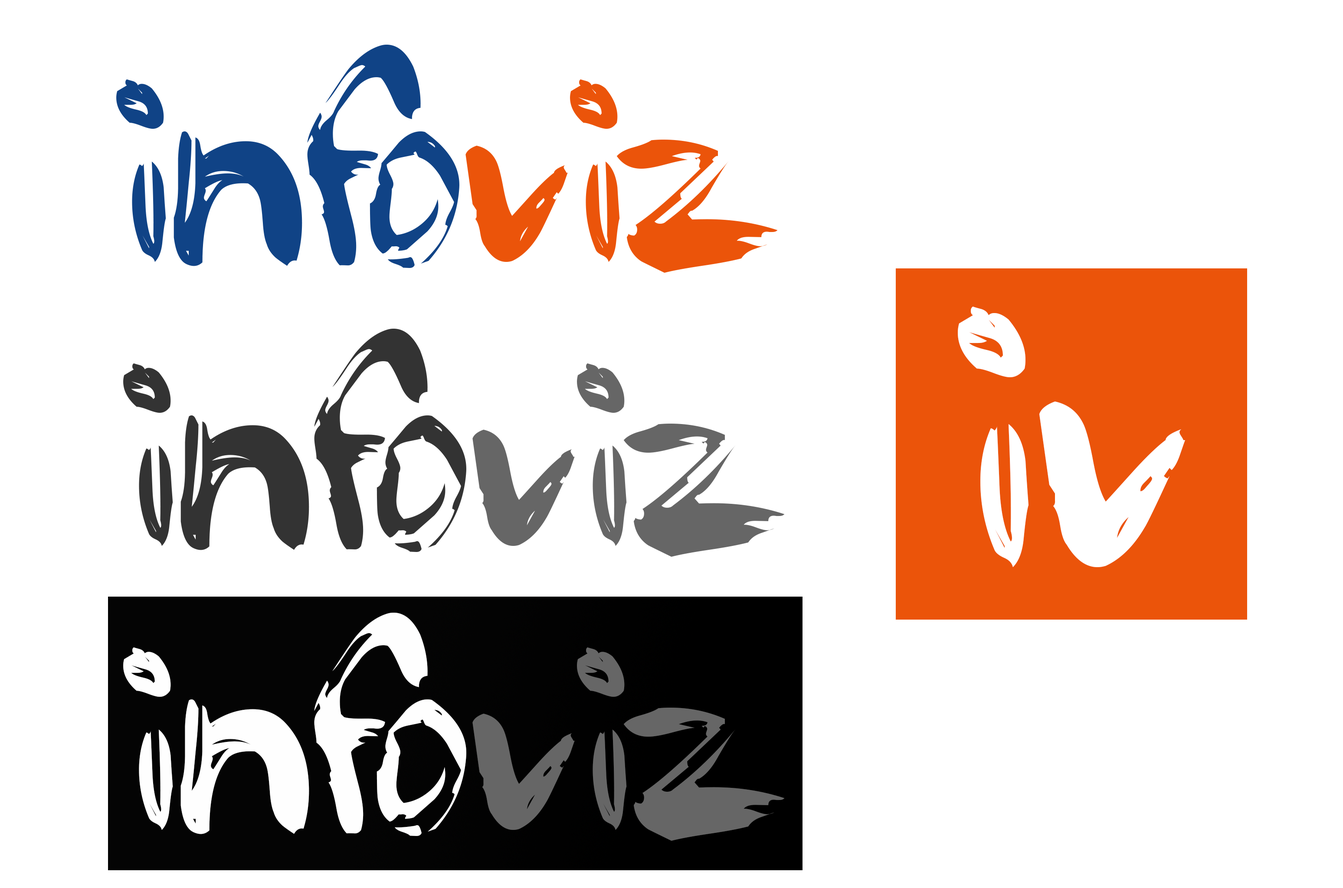
<style>
.page{position:relative;width:1343px;height:888px;background:#ffffff}
.page>*{position:absolute;margin:0}
.t1{font:303.6px "PaintyPaint1";color:#104386}
.t2{font:303.6px "PaintyPaint1";color:#eb540a}
.t3{font:433.7px "PaintyPaint1";color:#ffffff}
.t4{font:303.6px "PaintyPaint1";color:#333333}
.t5{font:303.6px "PaintyPaint1";color:#666666}
.t6{font:303.6px "PaintyPaint1";color:#fefefe}
</style>
<div class="page">
<p class="t1" style="left:116px;top:45px;width:662px;height:228px">info<span class="t2">viz</span></p>
<p class="t3" style="left:958px;top:307px;width:227px;height:260px">iv</p>
<p class="t4" style="left:123px;top:329px;width:661px;height:228px">info<span class="t5">viz</span></p>
<p class="t6" style="left:123px;top:613px;width:661px;height:228px">info<span class="t5">viz</span></p>
</div>
